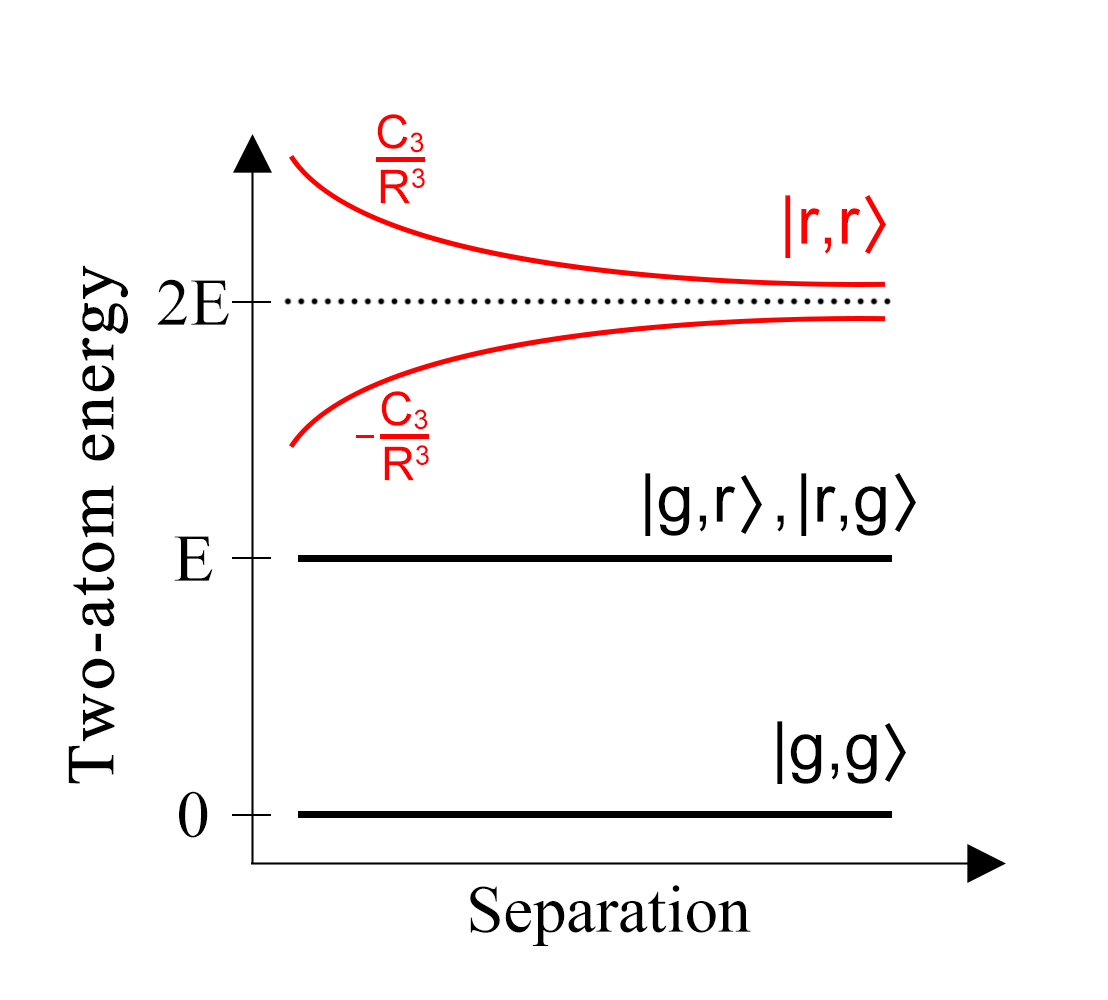
<style>
.page{position:relative;width:1108px;height:1000px;background:#ffffff}
.page>*{position:absolute;margin:0}
.t1{font:46.8px "ArialMT";color:#ff0000}
.t2{font:66.7px "ArialMT";color:#ff0000}
.t3{font:66.7px "TimesNewRomanPSMT";letter-spacing:0.02em;color:#000000;font-weight:bold}
.t4{font:66.7px "TimesNewRomanPSMT";color:#000000}
.t5{font:66.7px "ArialMT";color:#000000}
</style>
<div class="page">
<p class="t1" style="left:377px;top:114px;width:47px;height:39px">C3</p>
<p class="t1" style="left:380px;top:168px;width:45px;height:36px">R3</p>
<p class="t2" style="left:785px;top:195px;width:76px;height:63px">|r,r</p>
<p class="t3" style="left:68px;top:265px;width:60px;height:519px;rotate:180deg">Two-atom energy</p>
<p class="t4" style="left:157px;top:279px;width:72px;height:46px">2E</p>
<p class="t1" style="left:381px;top:391px;width:47px;height:39px">C3</p>
<p class="t1" style="left:384px;top:445px;width:45px;height:36px">R3</p>
<p class="t5" style="left:645px;top:473px;width:139px;height:63px">|g,r  ,</p>
<p class="t5" style="left:801px;top:473px;width:85px;height:63px">|r,g</p>
<p class="t4" style="left:174px;top:536px;width:39px;height:45px">E</p>
<p class="t5" style="left:777px;top:721px;width:100px;height:63px">|g,g</p>
<p class="t4" style="left:179px;top:791px;width:29px;height:47px">0</p>
<p class="t4" style="left:470px;top:885px;width:281px;height:61px">Separation</p>
</div>
